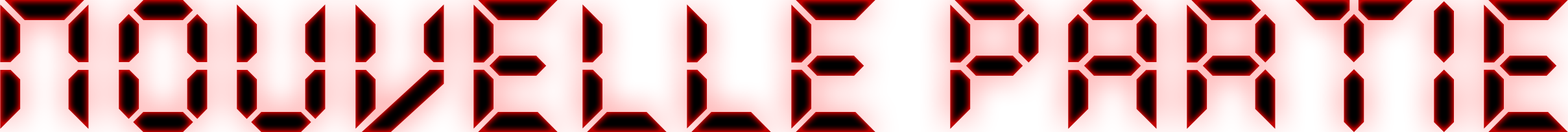
<style>
.page{position:relative;width:1568px;height:132px}
.page>*{position:absolute;margin:0}
.t1{font:189.1px "QuartzMS"}
</style>
<div class="page">
<p class="t1" style="left:0px;top:0px;width:1568px;height:132px">Nouvelle Partie</p>
</div>
